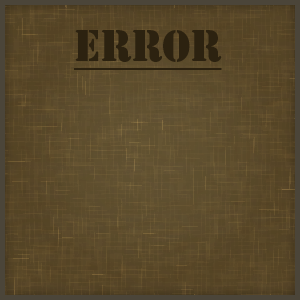
<style>
.page{position:relative;width:300px;height:300px}
.page>*{position:absolute;margin:0}
.t1{font:40px "StencilStd";color:#2c2210;text-decoration:underline}
</style>
<div class="page">
<p class="t1" style="left:74px;top:30px;width:148px;height:40px">Error</p>
</div>
